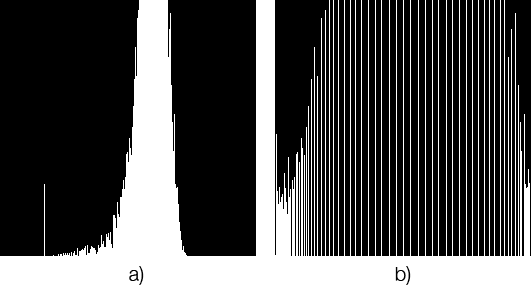
<style>
.page{position:relative;width:531px;height:296px;background:#000000}
.page>*{position:absolute;margin:0}
.t1{font:20px "HelveticaNeue-Light";color:#000000}
</style>
<div class="page">
<p class="t1" style="left:129px;top:266px;width:15px;height:19px">a)</p>
<p class="t1" style="left:395px;top:266px;width:16px;height:19px">b)</p>
</div>
